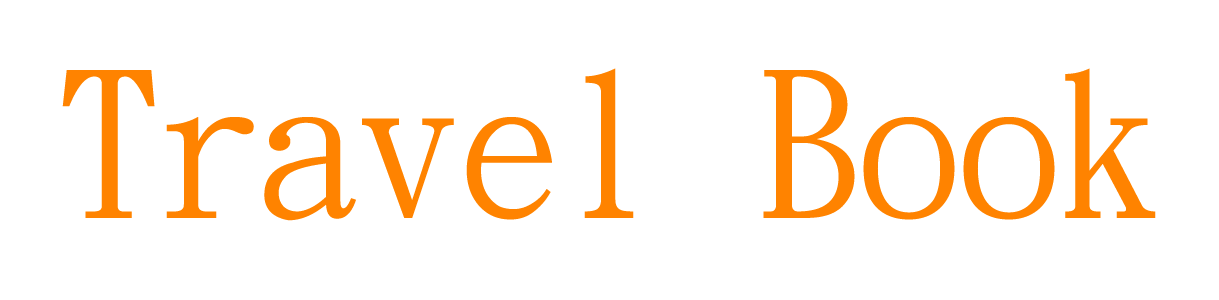
<style>
.page{position:relative;width:1219px;height:300px;background:#ffffff}
.page>*{position:absolute;margin:0}
.t1{font:200px "DFKaiShu-SB-Estd-BF";color:#ff8300}
</style>
<div class="page">
<p class="t1" style="left:62px;top:68px;width:1094px;height:153px">Travel Book</p>
</div>
